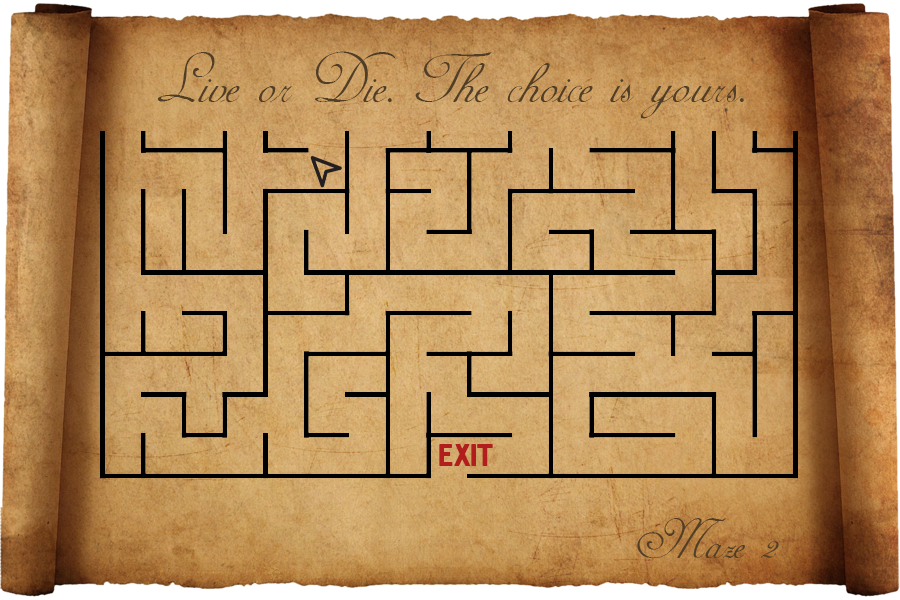
<style>
.page{position:relative;width:900px;height:600px}
.page>*{position:absolute;margin:0}
.t1{font:80px "AdineKirnberg-Script";color:#513e27}
.t2{font:32px "Hermes";color:#b21e1e}
.t3{font:64px "AdineKirnberg-Script";color:#513e27}
</style>
<div class="page">
<p class="t1" style="left:157px;top:51px;width:587px;height:68px">Live or Die. The choice is yours.</p>
<p class="t2" style="left:439px;top:444px;width:54px;height:22px">EXIT</p>
<p class="t3" style="left:637px;top:518px;width:142px;height:40px">Maze 2</p>
</div>
